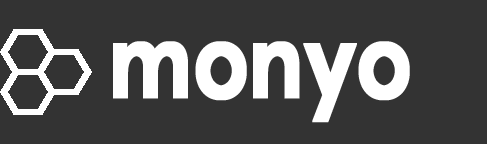
<style>
.page{position:relative;width:487px;height:144px;background:#333333}
.page>*{position:absolute;margin:0}
.t1{font:110px "ProductSans-Bold";color:#ffffff;font-weight:bold;scale:0.85 1}
</style>
<div class="page">
<p class="t1" style="left:113px;top:41px;width:297px;height:82px">monyo</p>
</div>
